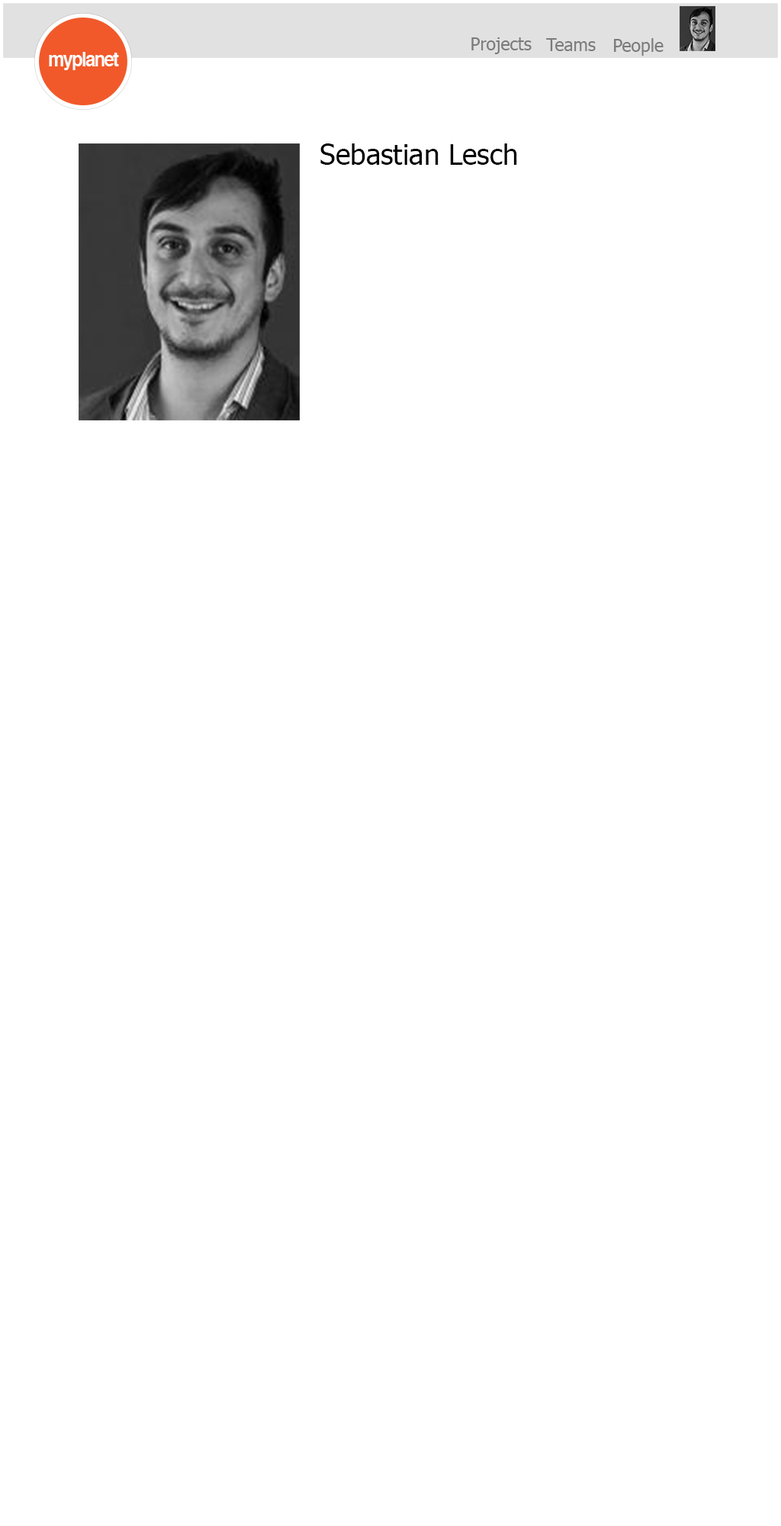
<style>
.page{position:relative;width:781px;height:1526px;background:#ffffff}
.page>*{position:absolute;margin:0}
.t1{font:17.5px "Tahoma";color:#7b7b7b}
.t2{font:28.2px "Tahoma";color:#000000}
</style>
<div class="page">
<p class="t1" style="left:472px;top:37px;width:60px;height:17px">Projects</p>
<p class="t1" style="left:546px;top:38px;width:50px;height:13px">Teams</p>
<p class="t1" style="left:614px;top:38px;width:50px;height:18px">People</p>
<p class="t2" style="left:320px;top:143px;width:197px;height:22px">Sebastian Lesch</p>
</div>
